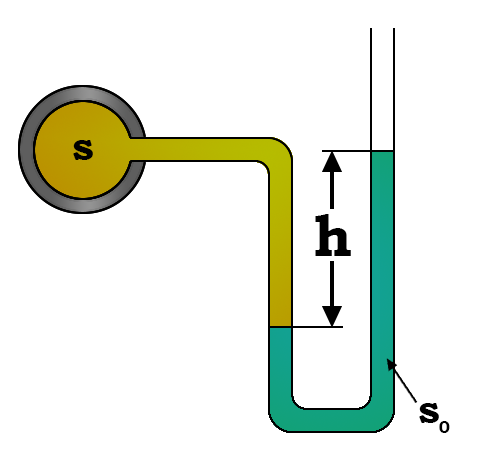
<style>
.page{position:relative;width:480px;height:474px;background:#ffffff}
.page>*{position:absolute;margin:0}
.t1{font:41.7px "BookmanOldStyle-Bold";color:#000000}
.t2{font:58.3px "BookmanOldStyle-Bold";color:#000000}
.t3{font:16.7px "BookmanOldStyle-Bold";color:#000000}
</style>
<div class="page">
<p class="t1" style="left:73px;top:140px;width:20px;height:20px">s</p>
<p class="t2" style="left:315px;top:214px;width:36px;height:42px">h</p>
<p class="t1" style="left:419px;top:403px;width:20px;height:20px">s</p>
<p class="t3" style="left:439px;top:421px;width:11px;height:12px">0</p>
</div>
